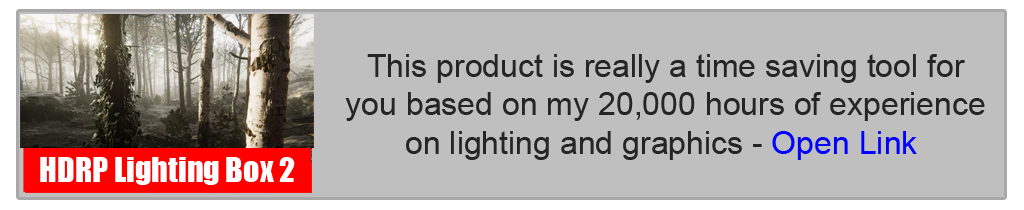
<style>
.page{position:relative;width:1024px;height:210px;background:#bfbfbf}
.page>*{position:absolute;margin:0}
.t1{font:32px "ArialMT";color:#252525}
.t2{font:32px "ArialMT";color:#0000ff}
.t3{font:32px "Impact";color:#ffffff}
</style>
<div class="page">
<p class="t1" style="left:345px;top:54px;width:640px;height:106px;text-align:center">This product is really a time saving tool for <br>you based on my 20,000 hours of experience <br>on lighting and graphics - <span class="t2">Open Link</span></p>
<p class="t3" style="left:40px;top:157px;width:255px;height:28px">HDRP Lighting Box 2</p>
</div>
